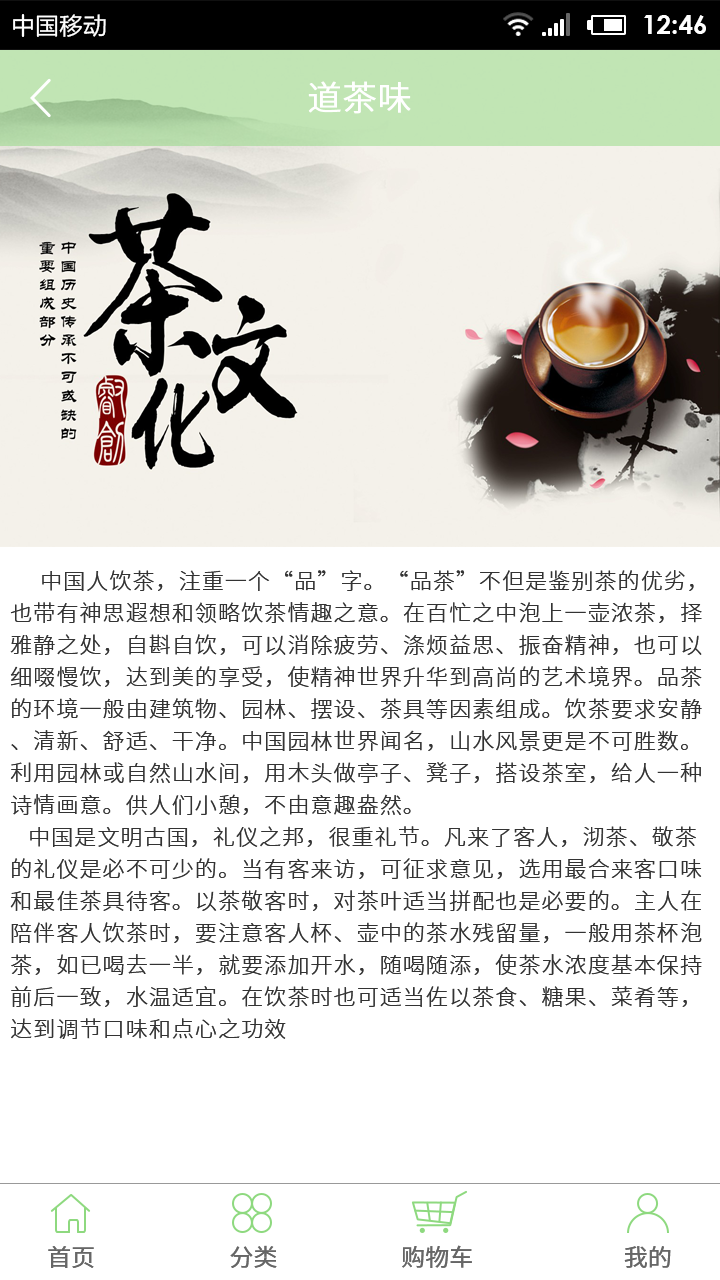
<style>
.page{position:relative;width:720px;height:1280px;background:#ffffff}
.page>*{position:absolute;margin:0}
.t1{font:34px "NotoSansHans-Light";color:#ffffff;font-weight:bold}
.t2{font:22px/32px "NotoSansHans-Light";letter-spacing:0.05em;color:#333333}
.t3{font:24px "NotoSansHans-Regular";color:#666666;text-transform:uppercase}
</style>
<div class="page">
<p class="t1" style="left:308px;top:81px;width:103px;height:33px">道茶味</p>
<p class="t2" style="left:10px;top:570px;width:692px;height:469px">中国人饮茶，注重一个“品”字。“品茶”不但是鉴别茶的优劣，也带有神思遐想和领略饮茶情趣之意。在百忙之中泡上一壶浓茶，择雅静之处，自斟自饮，可以消除疲劳、涤烦益思、振奋精神，也可以细啜慢饮，达到美的享受，使精神世界升华到高尚的艺术境界。品茶的环境一般由建筑物、园林、摆设、茶具等因素组成。饮茶要求安静、清新、舒适、干净。中国园林世界闻名，山水风景更是不可胜数。利用园林或自然山水间，用木头做亭子、凳子，搭设茶室，给人一种诗情画意。供人们小憩，不由意趣盎然。<br>   中国是文明古国，礼仪之邦，很重礼节。凡来了客人，沏茶、敬茶的礼仪是必不可少的。当有客来访，可征求意见，选用最合来客口味和最佳茶具待客。以茶敬客时，对茶叶适当拼配也是必要的。主人在陪伴客人饮茶时，要注意客人杯、壶中的茶水残留量，一般用茶杯泡茶，如已喝去一半，就要添加开水，随喝随添，使茶水浓度基本保持前后一致，水温适宜。在饮茶时也可适当佐以茶食、糖果、菜肴等，达到调节口味和点心之功效</p>
<p class="t3" style="left:48px;top:1245px;width:623px;height:23px">首页                         分类                       购物车                            我的</p>
</div>
